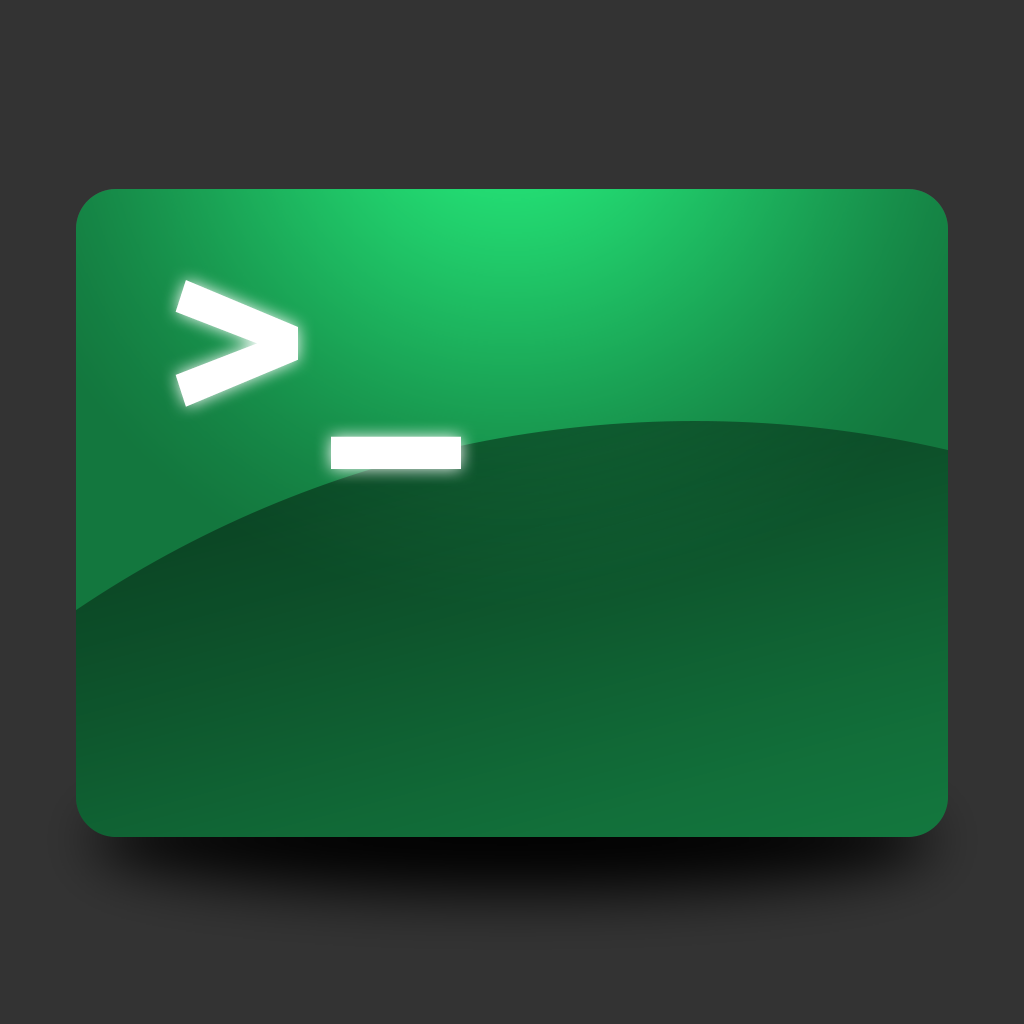
<style>
.page{position:relative;width:1024px;height:1024px;background:#333333}
.page>*{position:absolute;margin:0}
.t1{font:260px "Ubuntu-Bold";color:#ffffff}
</style>
<div class="page">
<p class="t1" style="left:175px;top:280px;width:286px;height:189px">&gt;_</p>
</div>
